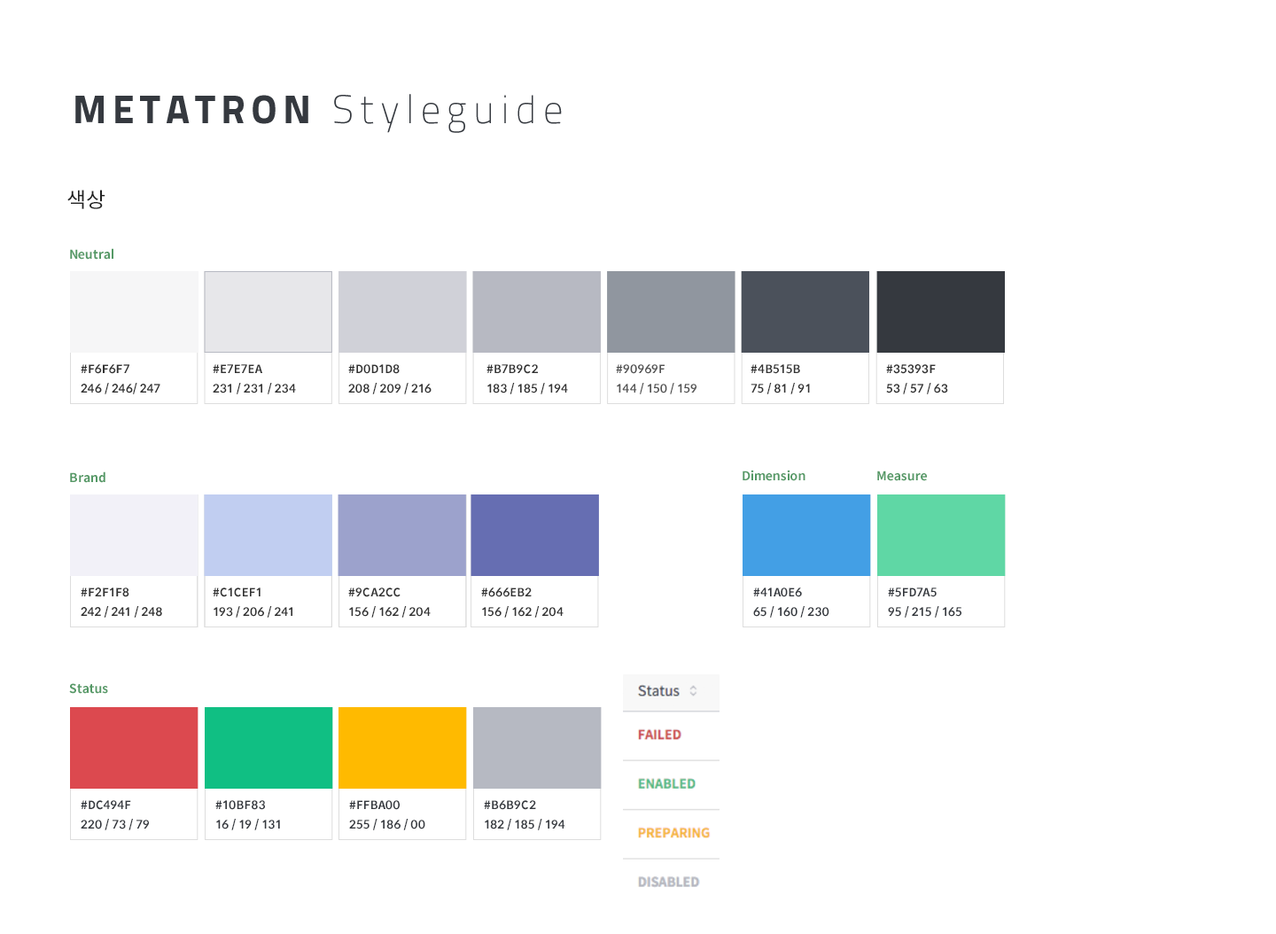
<style>
.page{position:relative;width:1276px;height:934px;background:#ffffff}
.page>*{position:absolute;margin:0}
.t1{font:39.9px "TitilliumText14L-Bold";letter-spacing:0.15em;color:#35393f}
.t2{font:39.9px "TitilliumText14L-999wt";letter-spacing:0.15em;color:#35393f}
.t3{font:21.3px "SpoqaHanSans-Regular";color:#222222}
.t4{font:12.4px "SpoqaHanSans-Bold";color:#559966}
.t5{font:11.5px/16px "SpoqaHanSans-Bold";color:#333333;text-transform:uppercase}
.t6{font:11.5px/16px "SpoqaHanSans-Bold";color:#535353;text-transform:uppercase}
.t7{font:11.5px/16px "SpoqaHanSans-Bold";color:#35393f;text-transform:uppercase}
</style>
<div class="page">
<p class="t1" style="left:75px;top:94px;width:487px;height:39px"><span class="t2">METATRON</span> Styleguide</p>
<p class="t3" style="left:67px;top:190px;width:38px;height:19px">색상</p>
<p class="t4" style="left:70px;top:248px;width:43px;height:12px">Neutral</p>
<p class="t5" style="left:81px;top:364px;width:79px;height:30px">#f6f6f7<br>246 / 246/ 247</p>
<p class="t5" style="left:213px;top:364px;width:83px;height:30px">#e7e7ea<br>231 / 231 / 234</p>
<p class="t5" style="left:348px;top:364px;width:84px;height:30px">#d0d1d8<br>208 / 209 / 216</p>
<p class="t5" style="left:487px;top:364px;width:81px;height:30px">#b7b9c2<br>183 / 185 / 194</p>
<p class="t6" style="left:616px;top:364px;width:81px;height:30px">#90969f<br>144 / 150 / 159</p>
<p class="t5" style="left:751px;top:364px;width:59px;height:30px">#4b515b<br>75 / 81 / 91</p>
<p class="t5" style="left:886px;top:364px;width:62px;height:30px">#35393f<br>53 / 57 / 63</p>
<p class="t4" style="left:70px;top:472px;width:35px;height:11px">Brand</p>
<p class="t4" style="left:743px;top:470px;width:63px;height:11px">Dimension</p>
<p class="t4" style="left:878px;top:471px;width:49px;height:10px">Measure</p>
<p class="t5" style="left:81px;top:588px;width:81px;height:30px">#f2f1f8<br>242 / 241 / 248</p>
<p class="t5" style="left:213px;top:588px;width:80px;height:30px">#c1cef1<br>193 / 206 / 241</p>
<p class="t5" style="left:348px;top:588px;width:83px;height:30px">#9ca2cc<br>156 / 162 / 204</p>
<p class="t5" style="left:481px;top:588px;width:83px;height:30px">#666eb2<br>156 / 162 / 204</p>
<p class="t7" style="left:753px;top:588px;width:77px;height:30px">#41a0e6<br>65 / 160 / 230</p>
<p class="t7" style="left:888px;top:588px;width:74px;height:30px">#5fd7a5<br>95 / 215 / 165</p>
<p class="t4" style="left:69px;top:683px;width:39px;height:11px">Status</p>
<p class="t7" style="left:81px;top:800px;width:68px;height:31px">#dc494f<br>220 / 73 / 79</p>
<p class="t7" style="left:215px;top:800px;width:65px;height:31px">#10bf83<br>16 / 19 / 131</p>
<p class="t7" style="left:349px;top:800px;width:76px;height:31px">#ffba00<br>255 / 186 / 00</p>
<p class="t7" style="left:484px;top:800px;width:82px;height:31px">#b6b9c2<br>182 / 185 / 194</p>
</div>
